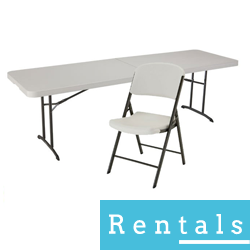
<style>
.page{position:relative;width:250px;height:250px;background:#ffffff}
.page>*{position:absolute;margin:0}
.t1{font:25.8px "Arvo";letter-spacing:0.264em;color:#ffffff}
</style>
<div class="page">
<p class="t1" style="left:109px;top:214px;width:134px;height:21px">Rentals</p>
</div>
